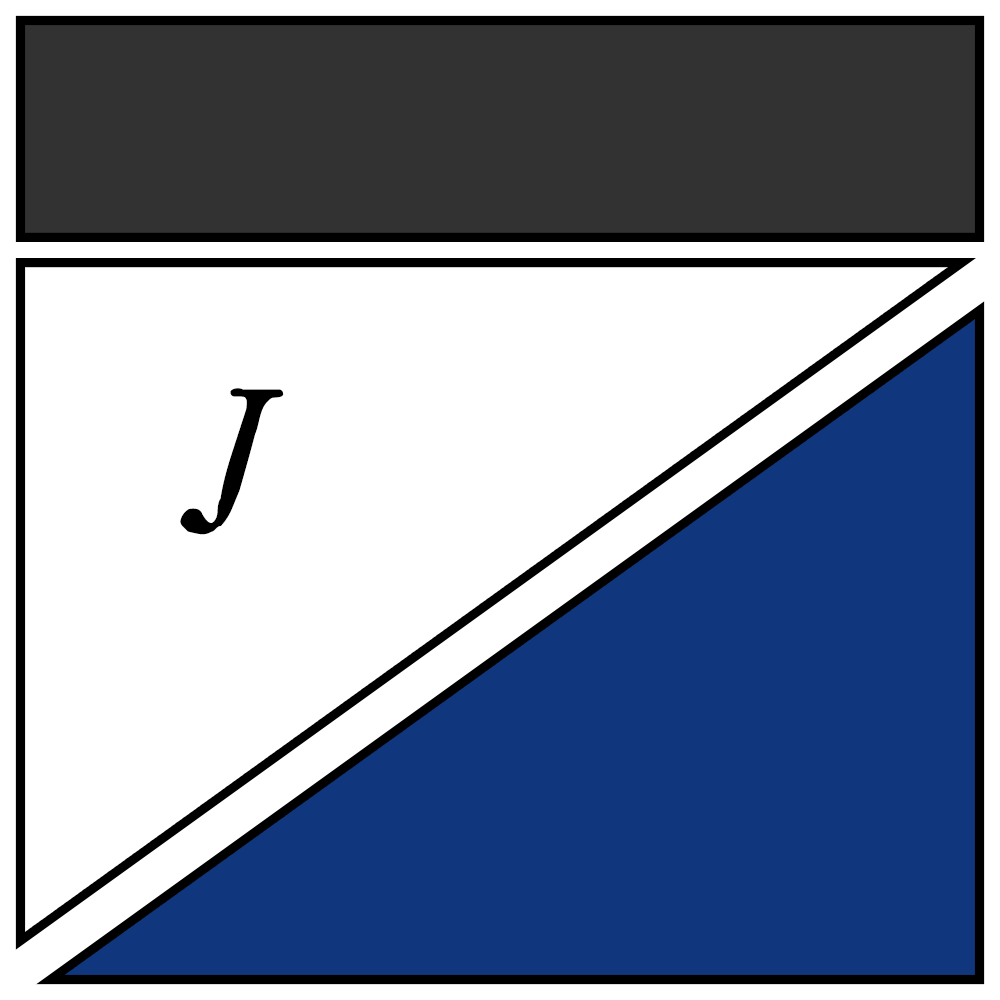
<style>
.page{position:relative;width:1000px;height:1000px;background:#ffffff}
.page>*{position:absolute;margin:0}
.t1{font:200.2px "OldstyleItalicHPLHS";color:#000000}
</style>
<div class="page">
<p class="t1" style="left:180px;top:388px;width:104px;height:147px">J</p>
</div>
